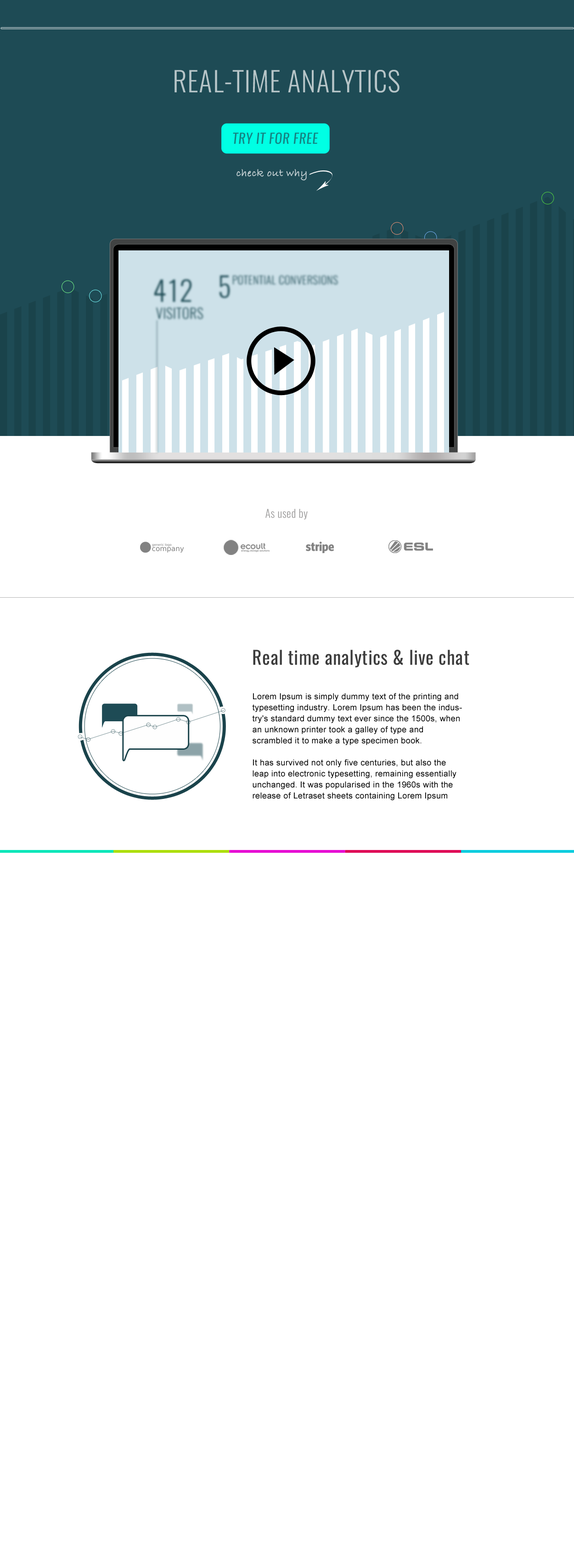
<style>
.page{position:relative;width:574px;height:1568px;background:#ffffff}
.page>*{position:absolute;margin:0}
.t1{font:27.6px "Oswald-Light";letter-spacing:0.025em;color:#b7c5c8}
.t2{font:13.7px "Oswald-RegularItalic";letter-spacing:0.025em;color:#148583}
.t3{font:11px "BradleyHandITCTTBold";letter-spacing:0.025em;color:#cbd5d8}
.t4{font:11px "Oswald-Light";letter-spacing:0.025em;color:#9a9999}
.t5{font:18.4px "Oswald-Regular";letter-spacing:0.025em;color:#3c3c3c}
.t6{font:8.3px/11px "ArialMT";letter-spacing:0.025em;color:#000000}
.t7{font:5.5px/11px "Oswald-Light";letter-spacing:0.025em;color:#ffffff}
</style>
<div class="page">
<p class="t1" style="left:175px;top:70px;width:225px;height:23px">REAL-TIME ANALYTICS</p>
<p class="t2" style="left:233px;top:132px;width:85px;height:12px">TRY IT FOR FREE</p>
<p class="t3" style="left:237px;top:169px;width:70px;height:12px">check out why</p>
<p class="t4" style="left:266px;top:509px;width:42px;height:11px">As used by</p>
<p class="t5" style="left:253px;top:650px;width:217px;height:18px">Real time analytics &amp; live chat</p>
<p class="t6" style="left:252px;top:693px;width:210px;height:107px">Lorem Ipsum is simply dummy text of the printing and typesetting industry. Lorem Ipsum has been the industry's standard dummy text ever since the 1500s, when an unknown printer took a galley of type and scrambled it to make a type specimen book. <br><br>It has survived not only five centuries, but also the leap into electronic typesetting, remaining essentially unchanged. It was popularised in the 1960s with the release of Letraset sheets containing Lorem Ipsum <span class="t7">passages</span></p>
</div>
